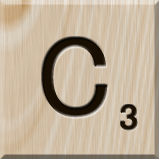
<style>
.page{position:relative;width:159px;height:159px}
.page>*{position:absolute;margin:0}
.t1{font:116px "MS-UIGothic";color:#180e01}
.t2{font:36px "MS-UIGothic";color:#1c1101;font-weight:bold;scale:1.1 1}
</style>
<div class="page">
<p class="t1" style="left:42px;top:37px;width:66px;height:81px">C</p>
<p class="t2" style="left:120px;top:104px;width:18px;height:27px">3</p>
</div>
